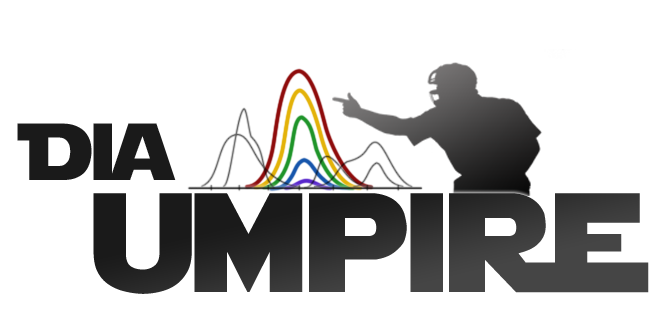
<style>
.page{position:relative;width:661px;height:314px;background:#ffffff}
.page>*{position:absolute;margin:0}
.t1{font:80px "StarJedi";color:#1a1a1a}
.t2{font:140px "StarJedi";color:#2d2d2d}
</style>
<div class="page">
<p class="t1" style="left:17px;top:123px;width:159px;height:57px">Dia</p>
<p class="t2" style="left:93px;top:193px;width:556px;height:101px">umpire</p>
</div>
